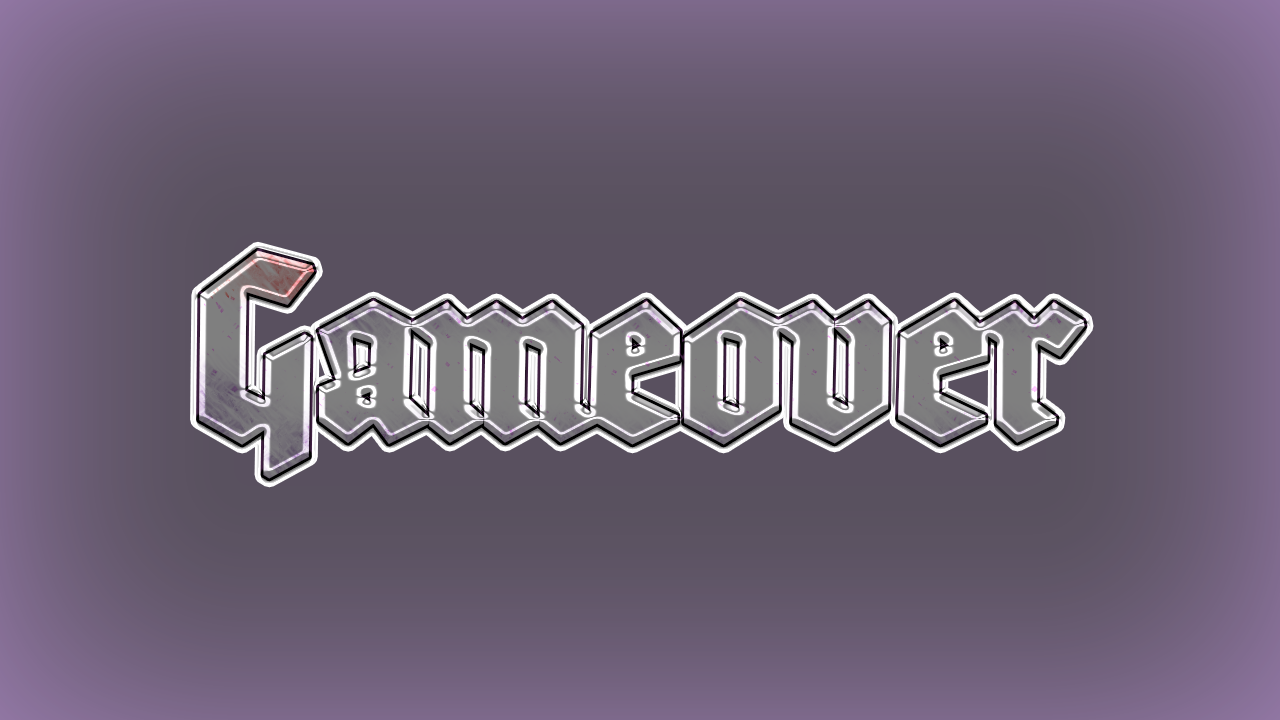
<style>
.page{position:relative;width:1280px;height:720px}
.page>*{position:absolute;margin:0}
.t1{font:236.7px "BrokenscriptOT-CondBold";letter-spacing:-0.03em;font-weight:bold;scale:0.9 1}
</style>
<div class="page">
<p class="t1" style="left:199px;top:250px;width:886px;height:229px">Gameover</p>
</div>
